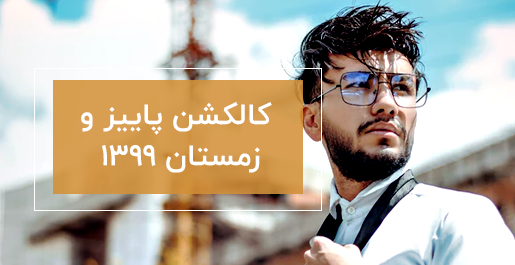
<style>
.page{position:relative;width:515px;height:265px}
.page>*{position:absolute;margin:0}
.t1{font:30px/41px "IRANYekan-Bold";color:#ffffff}
</style>
<div class="page">
<p class="t1" style="left:81px;top:102px;width:191px;height:71px;text-align:center">کالکشن پاییز و<br> زمستان 1399</p>
</div>
